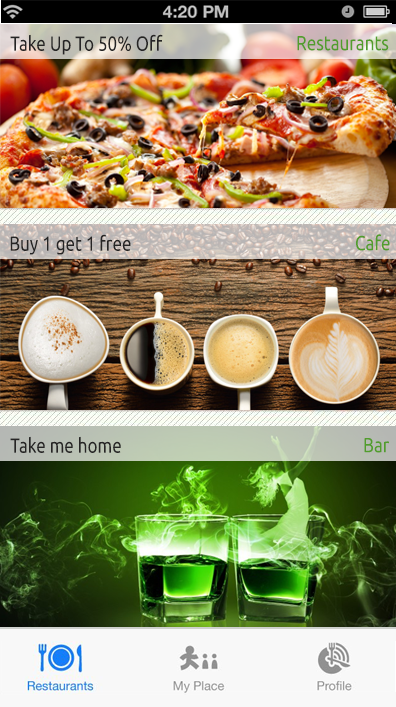
<style>
.page{position:relative;width:396px;height:707px}
.page>*{position:absolute;margin:0}
.t1{font:20.4px "Ubuntu";color:#262525;scale:0.83 1}
.t2{font:20.4px "Ubuntu";color:#529d2c;scale:0.83 1}
</style>
<div class="page">
<p class="t1" style="left:10px;top:34px;width:153px;height:21px">Take Up To 50% Off</p>
<p class="t2" style="left:297px;top:36px;width:92px;height:15px">Restaurants</p>
<p class="t1" style="left:10px;top:234px;width:121px;height:21px">Buy 1 get 1 free</p>
<p class="t2" style="left:356px;top:234px;width:34px;height:17px">Cafe</p>
<p class="t1" style="left:10px;top:436px;width:111px;height:17px">Take me home</p>
<p class="t2" style="left:364px;top:438px;width:25px;height:15px">Bar</p>
</div>
